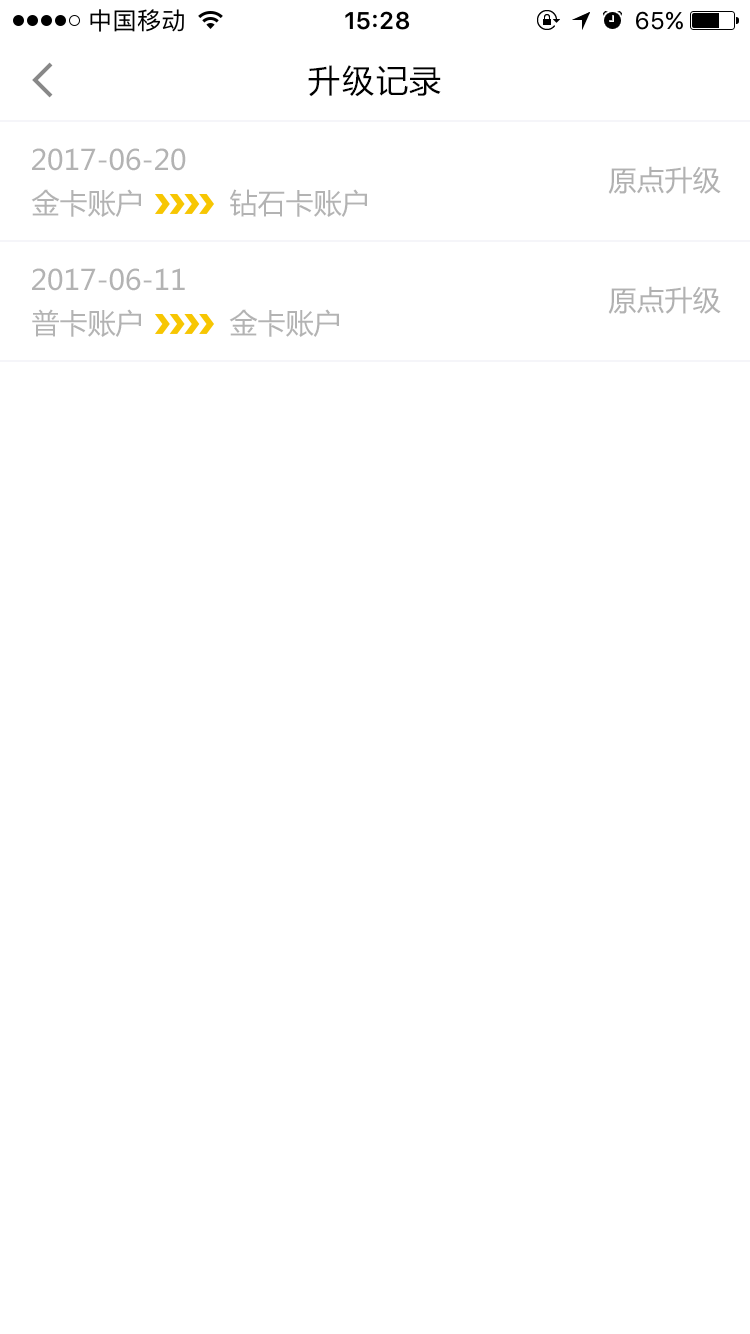
<style>
.page{position:relative;width:750px;height:1334px;background:#ffffff}
.page>*{position:absolute;margin:0}
.t1{font:32px "MicrosoftYaHei";letter-spacing:0.05em;color:#000000}
.t2{font:28px "MicrosoftYaHei";color:#b3b3b3}
.t3{font:28px "MicrosoftYaHei";color:#b1b1b1}
</style>
<div class="page">
<p class="t1" style="left:308px;top:65px;width:133px;height:32px">升级记录</p>
<p class="t2" style="left:32px;top:148px;width:154px;height:23px">2017-06-20</p>
<p class="t3" style="left:608px;top:166px;width:113px;height:28px">原点升级</p>
<p class="t2" style="left:31px;top:189px;width:110px;height:28px">金卡账户</p>
<p class="t2" style="left:230px;top:189px;width:137px;height:28px">钻石卡账户</p>
<p class="t2" style="left:32px;top:268px;width:153px;height:23px">2017-06-11</p>
<p class="t3" style="left:608px;top:286px;width:113px;height:28px">原点升级</p>
<p class="t2" style="left:32px;top:309px;width:109px;height:28px">普卡账户</p>
<p class="t2" style="left:229px;top:309px;width:110px;height:28px">金卡账户</p>
</div>
